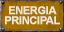
<style>
.page{position:relative;width:64px;height:32px}
.page>*{position:absolute;margin:0}
.t1{font:10.7px/10.7px "Arial-BoldMT";letter-spacing:-0.04em;color:#efe7d4;text-transform:uppercase;font-weight:bold}
</style>
<div class="page">
<p class="t1" style="left:5px;top:6px;width:55px;height:19px;text-align:center">Energia<br>principal</p>
</div>
